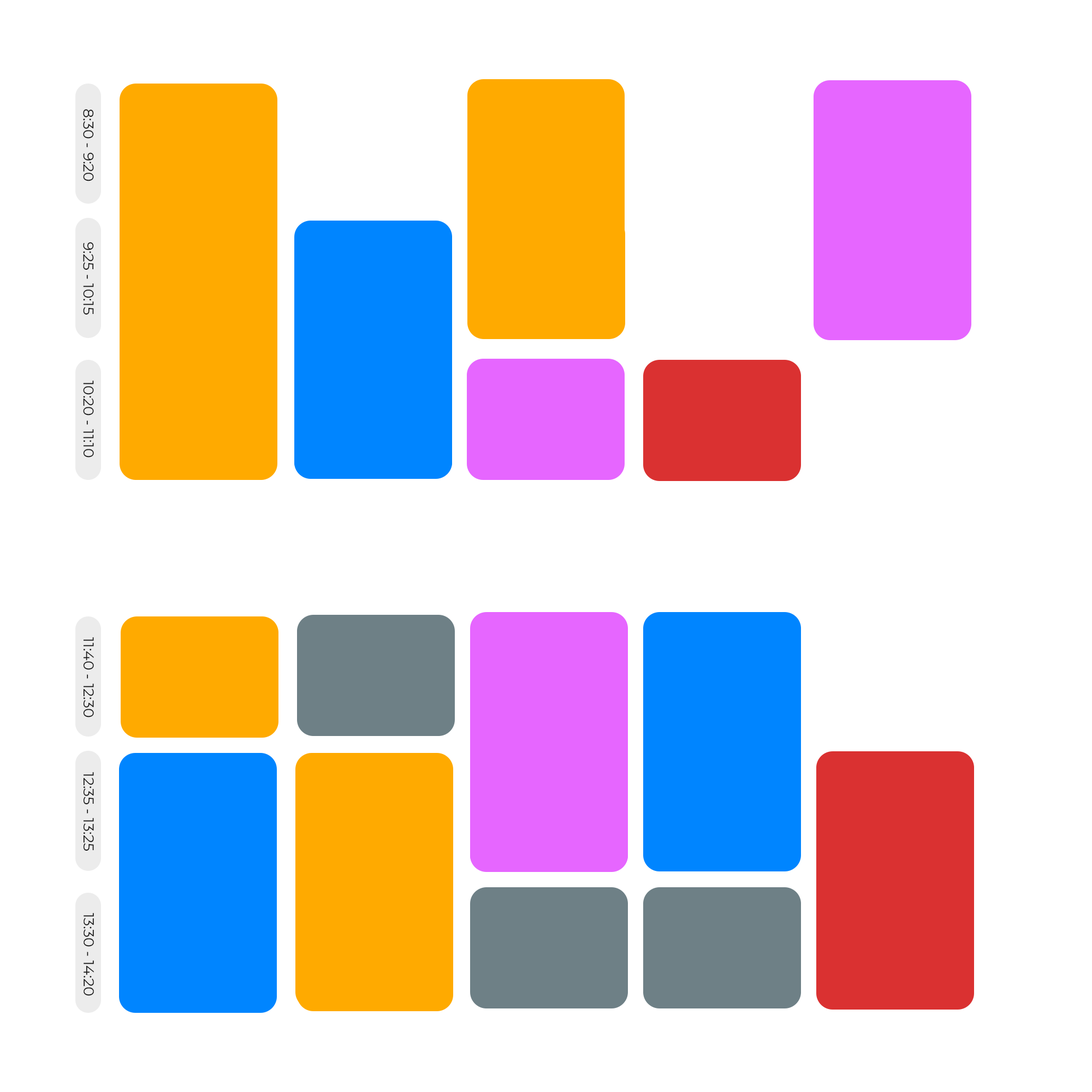
<style>
.page{position:relative;width:1092px;height:1092px;background:#ffffff}
.page>*{position:absolute;margin:0}
.t1{font:14.5px "Montserrat-Regular";color:#000000}
</style>
<div class="page">
<p class="t1" style="left:83px;top:109px;width:11px;height:72px;rotate:90deg">8:30 - 9:20</p>
<p class="t1" style="left:83px;top:242px;width:11px;height:73px;rotate:90deg">9:25 - 10:15</p>
<p class="t1" style="left:83px;top:381px;width:11px;height:77px;rotate:90deg">10:20 - 11:10</p>
<p class="t1" style="left:83px;top:637px;width:11px;height:80px;rotate:90deg">11:40 - 12:30</p>
<p class="t1" style="left:83px;top:772px;width:11px;height:79px;rotate:90deg">12:35 - 13:25</p>
<p class="t1" style="left:84px;top:913px;width:10px;height:83px;rotate:90deg">13:30 - 14:20</p>
</div>
